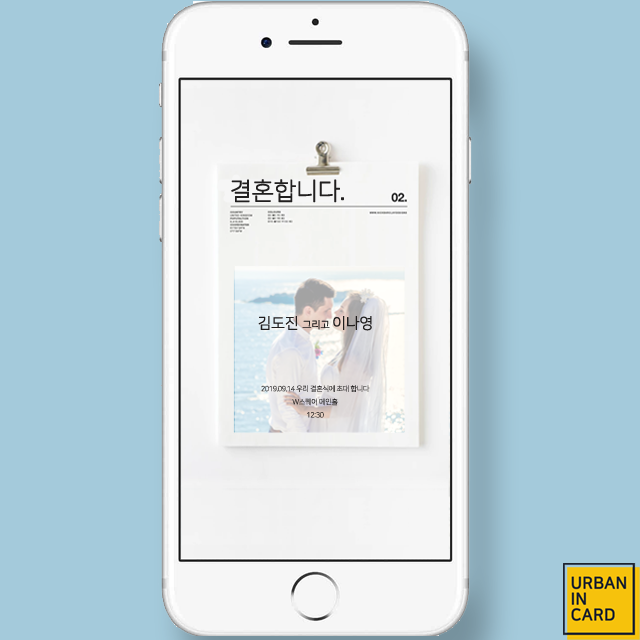
<style>
.page{position:relative;width:640px;height:640px;background:#a4cadb}
.page>*{position:absolute;margin:0}
.t1{font:24.1px "NanumSquareL";letter-spacing:-0.02em;color:#211f1f;font-weight:bold}
.t2{font:14.9px "NanumSquareL";letter-spacing:-0.02em;color:#211f1f;font-weight:bold}
.t3{font:9.9px "NanumSquareL";letter-spacing:-0.02em;color:#211f1f;font-weight:bold}
.t4{font:7.2px/13.1px "NanumSquareL";letter-spacing:-0.04em;color:#211f1f}
</style>
<div class="page">
<p class="t1" style="left:231px;top:179px;width:113px;height:24px">결혼합니다.</p>
<p class="t2" style="left:258px;top:316px;width:114px;height:15px">김도진 <span class="t3">그리고 </span>이나영</p>
<p class="t4" style="left:261px;top:385px;width:109px;height:33px;text-align:center">2019.09.14 우리 결혼식에 초대 합니다<br>W스퀘어 메인홀<br>12:30</p>
</div>
